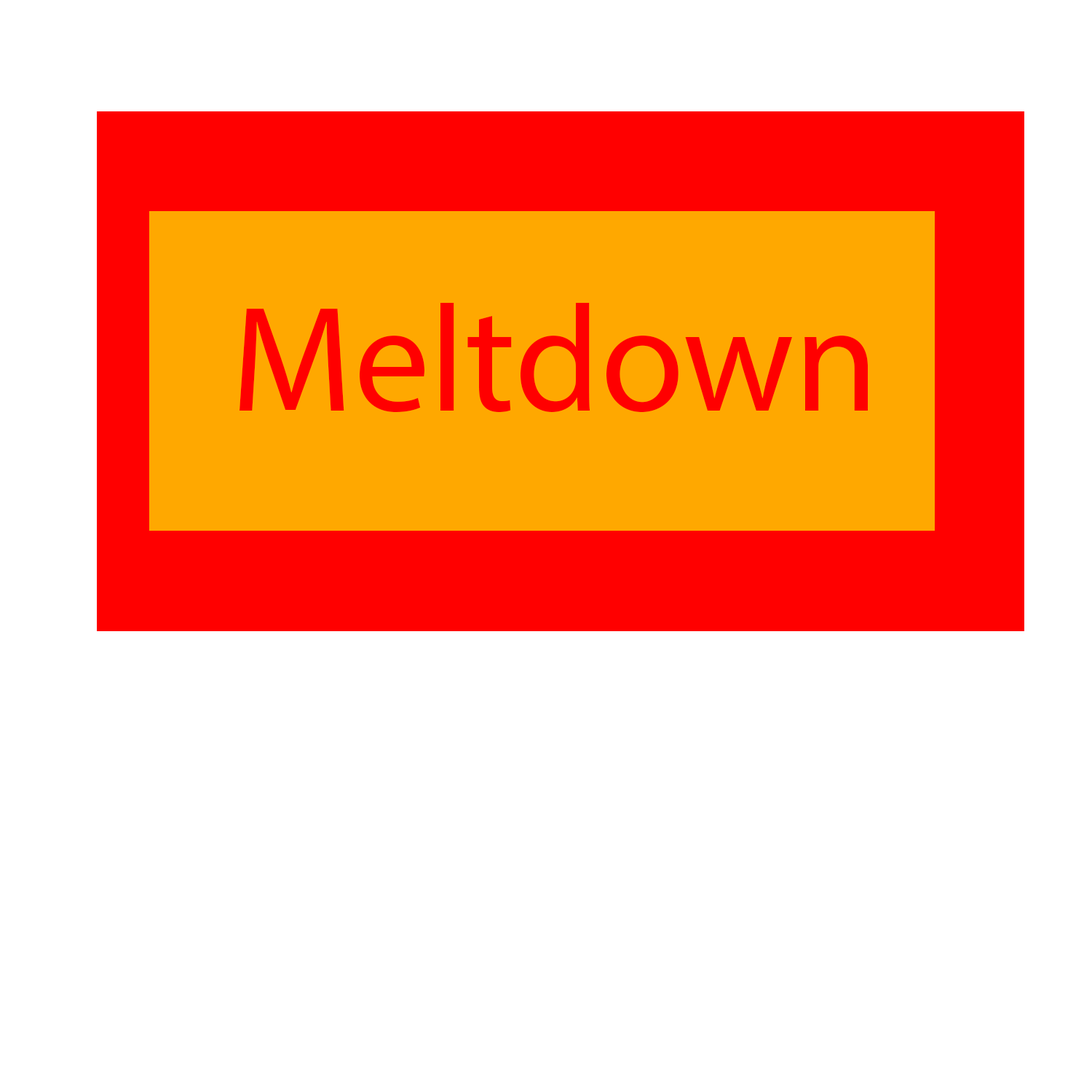
<style>
.page{position:relative;width:1092px;height:1092px;background:#ffffff}
.page>*{position:absolute;margin:0}
.t1{font:151.7px "MyriadPro-Regular";color:#ff0000}
</style>
<div class="page">
<p class="t1" style="left:240px;top:303px;width:628px;height:110px">Meltdown</p>
</div>
